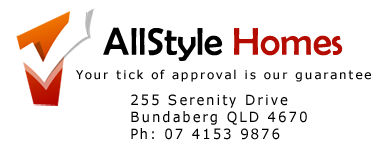
<style>
.page{position:relative;width:380px;height:150px;background:#ffffff}
.page>*{position:absolute;margin:0}
.t1{font:38.8px "BerlinSansFB-Reg";color:#000000}
.t2{font:38.8px "BerlinSansFB-Reg";color:#b40c00}
.t3{font:12.1px "Verdana";letter-spacing:0.15em;color:#000000}
.t4{font:14.2px "Verdana";letter-spacing:0.15em;color:#000000;scale:0.93 1}
</style>
<div class="page">
<p class="t1" style="left:103px;top:27px;width:240px;height:34px">AllStyle <span class="t2">Homes</span></p>
<p class="t3" style="left:76px;top:69px;width:295px;height:13px">Your tick of approval is our guarantee</p>
<p class="t4" style="left:131px;top:94px;width:176px;height:46px">255 Serenity Drive<br>Bundaberg QLD 4670 <br>Ph: 07 4153 9876</p>
</div>
